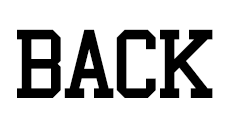
<style>
.page{position:relative;width:230px;height:128px;background:#ffffff}
.page>*{position:absolute;margin:0}
.t1{font:99.7px "College";letter-spacing:-0.06em;color:#000000}
</style>
<div class="page">
<p class="t1" style="left:17px;top:29px;width:196px;height:69px">BACK</p>
</div>
